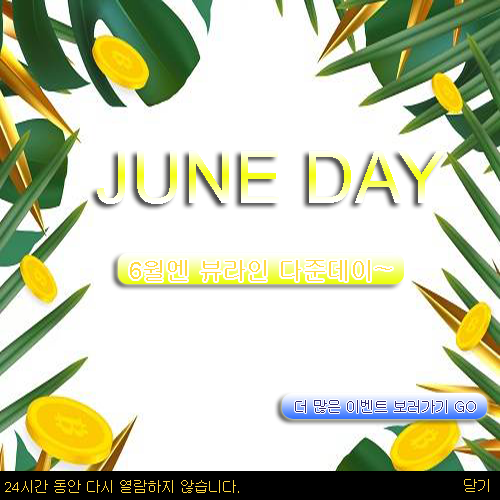
<style>
.page{position:relative;width:500px;height:500px;background:#ffffff}
.page>*{position:absolute;margin:0}
.t1{font:72px "ArialMT"}
.t2{font:24px "Gulim";color:#ffd943}
.t3{font:24px "ArialMT";color:#ffd943}
.t4{font:14px "Gulim";color:#2c256e}
.t5{font:14px "Gulim";color:#ffd943}
.t6{font:14px "ArialMT";color:#ffd943}
</style>
<div class="page">
<p class="t1" style="left:97px;top:151px;width:348px;height:53px">JUNE DAY</p>
<p class="t2" style="left:130px;top:260px;width:262px;height:21px"><span class="t3">6</span>월엔 뷰라인 다준데이~</p>
<p class="t4" style="left:295px;top:400px;width:181px;height:13px">더 많은 이벤트 보러가기 GO</p>
<p class="t5" style="left:5px;top:480px;width:234px;height:13px"><span class="t6">24</span>시간 동안 다시 열람하지 않습니다.</p>
<p class="t5" style="left:464px;top:479px;width:25px;height:13px">닫기</p>
</div>
